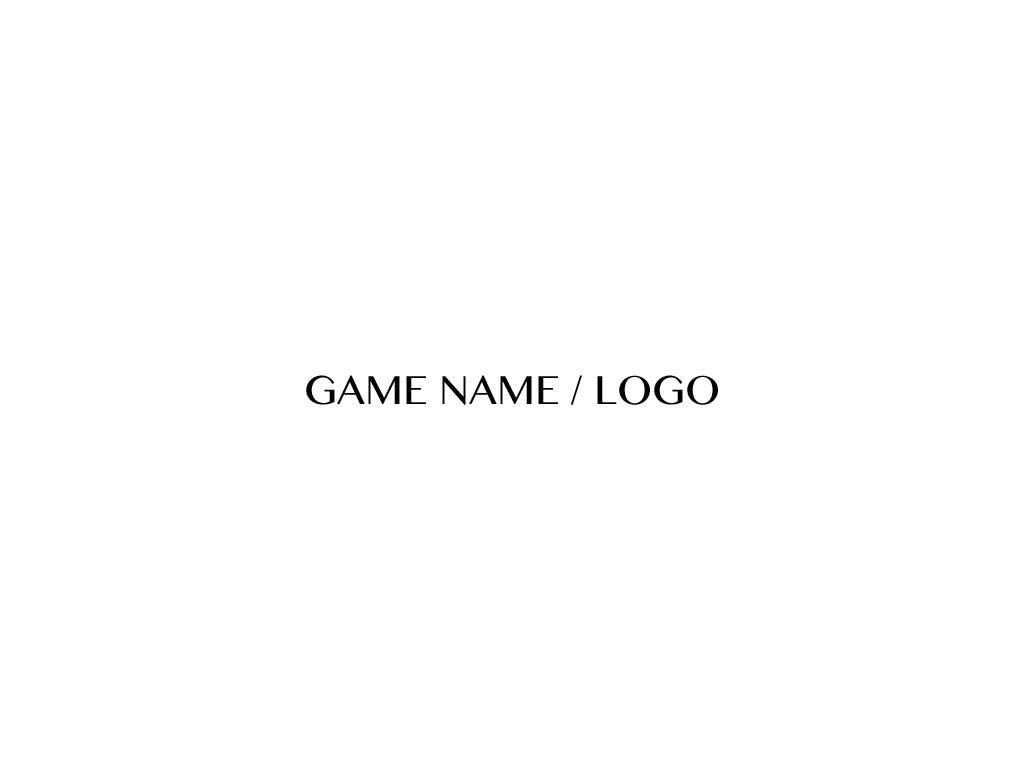
<style>
.page{position:relative;width:1024px;height:768px;background:#ffffff}
.page>*{position:absolute;margin:0}
.t1{font:48px "KhmerMN";color:#000000}
</style>
<div class="page">
<p class="t1" style="left:306px;top:375px;width:412px;height:30px">GAME NAME / LOGO</p>
</div>
